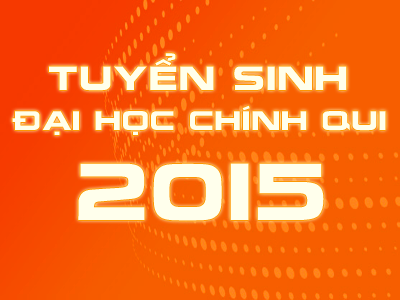
<style>
.page{position:relative;width:400px;height:300px}
.page>*{position:absolute;margin:0}
.t1{font:30px "UTM-Nokia";letter-spacing:0.05em;color:#ffffec}
.t2{font:24px "UTM-Nokia";letter-spacing:0.05em;color:#ffffec}
.t3{font:72px "UTM-Nokia";letter-spacing:0.05em;color:#ffffec}
</style>
<div class="page">
<p class="t1" style="left:49px;top:53px;width:298px;height:38px">TUYỂN SINH</p>
<p class="t2" style="left:12px;top:105px;width:374px;height:30px">ĐẠI HỌC CHÍNH QUI</p>
<p class="t3" style="left:78px;top:163px;width:246px;height:58px">2015</p>
</div>
